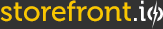
<style>
.page{position:relative;width:163px;height:29px;background:#323232}
.page>*{position:absolute;margin:0}
.t1{font:28.5px "Museo-500";color:#f9c700}
.t2{font:28.5px "Museo-500";color:#ffffff}
</style>
<div class="page">
<p class="t1" style="left:0px;top:0px;width:163px;height:22px">storefront<span class="t2">.io</span></p>
</div>
